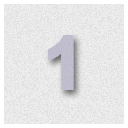
<style>
.page{position:relative;width:128px;height:128px;background:#ededed}
.page>*{position:absolute;margin:0}
.t1{font:75px "Arial-BoldMT";color:#c0bdce;font-weight:bold}
</style>
<div class="page">
<p class="t1" style="left:47px;top:35px;width:27px;height:55px">1</p>
</div>
